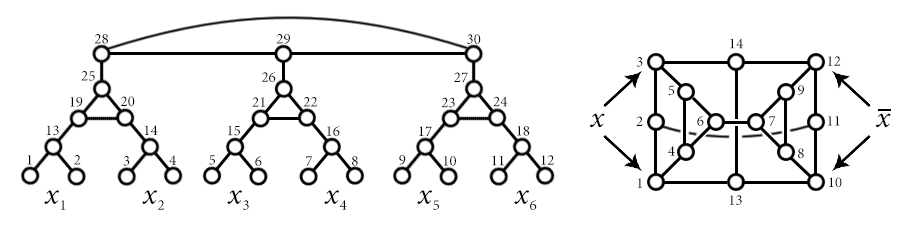
<style>
.page{position:relative;width:900px;height:228px;background:#ffffff}
.page>*{position:absolute;margin:0}
.t1{font:15px "MinionPro-Regular";color:#000000}
.t2{font:15px "MinionPro-Regular"}
</style>
<div class="page">
<p class="t1" style="left:94px;top:34px;width:14px;height:10px">28</p>
<p class="t1" style="left:276px;top:34px;width:14px;height:10px">29</p>
<p class="t1" style="left:467px;top:34px;width:14px;height:10px">30</p>
<p class="t1" style="left:730px;top:38px;width:13px;height:11px">14</p>
<p class="t1" style="left:637px;top:57px;width:6px;height:10px">3</p>
<p class="t1" style="left:828px;top:56px;width:13px;height:10px">12</p>
<p class="t1" style="left:81px;top:71px;width:14px;height:10px">25</p>
<p class="t1" style="left:262px;top:72px;width:14px;height:10px">26</p>
<p class="t1" style="left:454px;top:72px;width:14px;height:11px">27</p>
<p class="t1" style="left:668px;top:85px;width:7px;height:11px">5</p>
<p class="t1" style="left:798px;top:85px;width:6px;height:10px">9</p>
<p class="t1" style="left:70px;top:97px;width:13px;height:10px">19</p>
<p class="t1" style="left:121px;top:96px;width:14px;height:11px">20</p>
<p class="t1" style="left:252px;top:97px;width:13px;height:10px">21</p>
<p class="t1" style="left:303px;top:97px;width:14px;height:10px">22</p>
<p class="t1" style="left:441px;top:97px;width:14px;height:11px">23</p>
<p class="t1" style="left:493px;top:96px;width:15px;height:11px">24</p>
<p class="t1" style="left:46px;top:125px;width:13px;height:11px">13</p>
<p class="t1" style="left:144px;top:125px;width:14px;height:10px">14</p>
<p class="t1" style="left:228px;top:125px;width:12px;height:11px">15</p>
<p class="t1" style="left:327px;top:126px;width:13px;height:10px">16</p>
<p class="t1" style="left:419px;top:126px;width:13px;height:11px">17</p>
<p class="t1" style="left:517px;top:126px;width:13px;height:10px">18</p>
<p class="t1" style="left:636px;top:116px;width:7px;height:10px">2</p>
<p class="t1" style="left:697px;top:116px;width:7px;height:10px">6</p>
<p class="t2" style="left:769px;top:116px;width:7px;height:10px">7</p>
<p class="t1" style="left:828px;top:116px;width:12px;height:10px">11</p>
<p class="t1" style="left:668px;top:146px;width:7px;height:10px">4</p>
<p class="t1" style="left:798px;top:148px;width:6px;height:11px">8</p>
<p class="t1" style="left:27px;top:155px;width:5px;height:10px">1</p>
<p class="t1" style="left:74px;top:155px;width:7px;height:10px">2</p>
<p class="t1" style="left:123px;top:156px;width:7px;height:10px">3</p>
<p class="t2" style="left:169px;top:155px;width:7px;height:10px">4</p>
<p class="t1" style="left:209px;top:155px;width:6px;height:10px">5</p>
<p class="t1" style="left:255px;top:156px;width:7px;height:10px">6</p>
<p class="t2" style="left:306px;top:156px;width:6px;height:10px">7</p>
<p class="t1" style="left:352px;top:156px;width:6px;height:10px">8</p>
<p class="t1" style="left:399px;top:155px;width:7px;height:10px">9</p>
<p class="t1" style="left:443px;top:156px;width:13px;height:10px">10</p>
<p class="t1" style="left:492px;top:155px;width:12px;height:11px">11</p>
<p class="t1" style="left:541px;top:155px;width:13px;height:10px">12</p>
<p class="t2" style="left:637px;top:178px;width:5px;height:10px">1</p>
<p class="t1" style="left:829px;top:177px;width:13px;height:11px">10</p>
<p class="t1" style="left:729px;top:195px;width:13px;height:10px">13</p>
</div>
